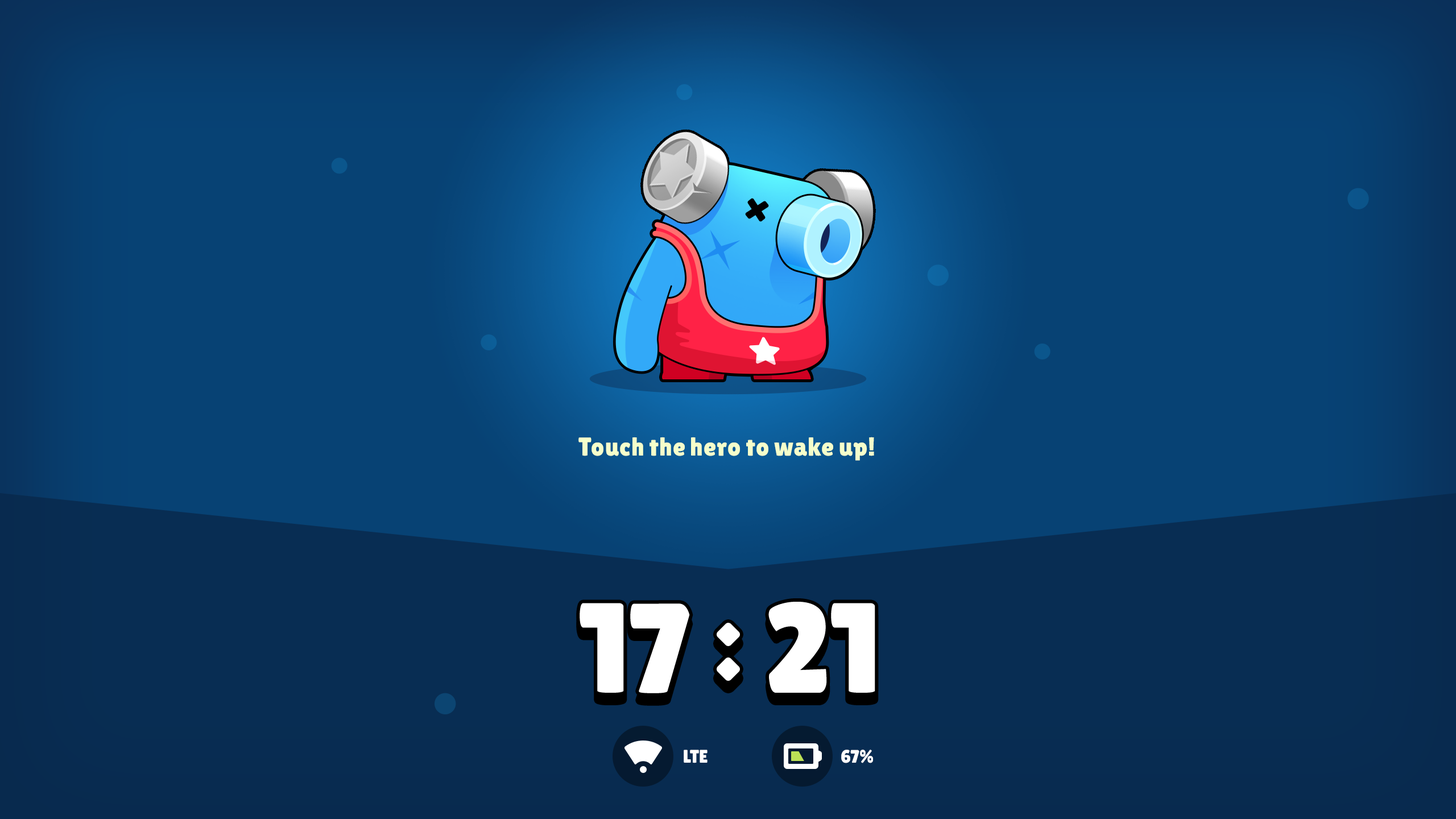
<style>
.page{position:relative;width:1456px;height:819px;background:#074274}
.page>*{position:absolute;margin:0}
.t1{font:25.8px "LilitaOne";color:#f5ffcb}
.t2{font:128px "LilitaOne";color:#ffffff}
.t3{font:18.2px "LilitaOne";color:#ffffff}
</style>
<div class="page">
<p class="t1" style="left:578px;top:437px;width:296px;height:24px">Touch the hero to wake up!</p>
<p class="t2" style="left:580px;top:602px;width:295px;height:91px">17   21</p>
<p class="t3" style="left:684px;top:750px;width:24px;height:13px">LTE</p>
<p class="t3" style="left:841px;top:750px;width:32px;height:13px">67%</p>
</div>
